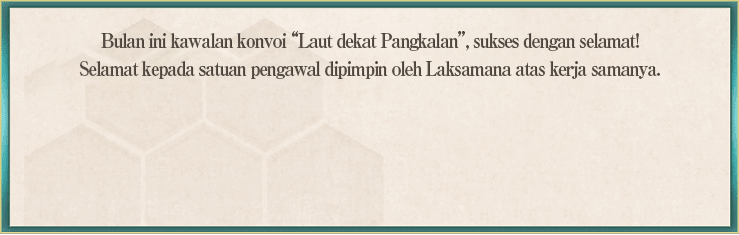
<style>
.page{position:relative;width:739px;height:235px}
.page>*{position:absolute;margin:0}
.t1{font:20px/28px "RyuminPro-ExBold";letter-spacing:-0.08em;color:#64594f;scale:0.9 1}
</style>
<div class="page">
<p class="t1" style="left:79px;top:31px;width:581px;height:48px;text-align:center">Bulan ini kawalan konvoi “Laut dekat Pangkalan”, sukses dengan selamat!<br>Selamat kepada satuan pengawal dipimpin oleh Laksamana atas kerja samanya.</p>
</div>
